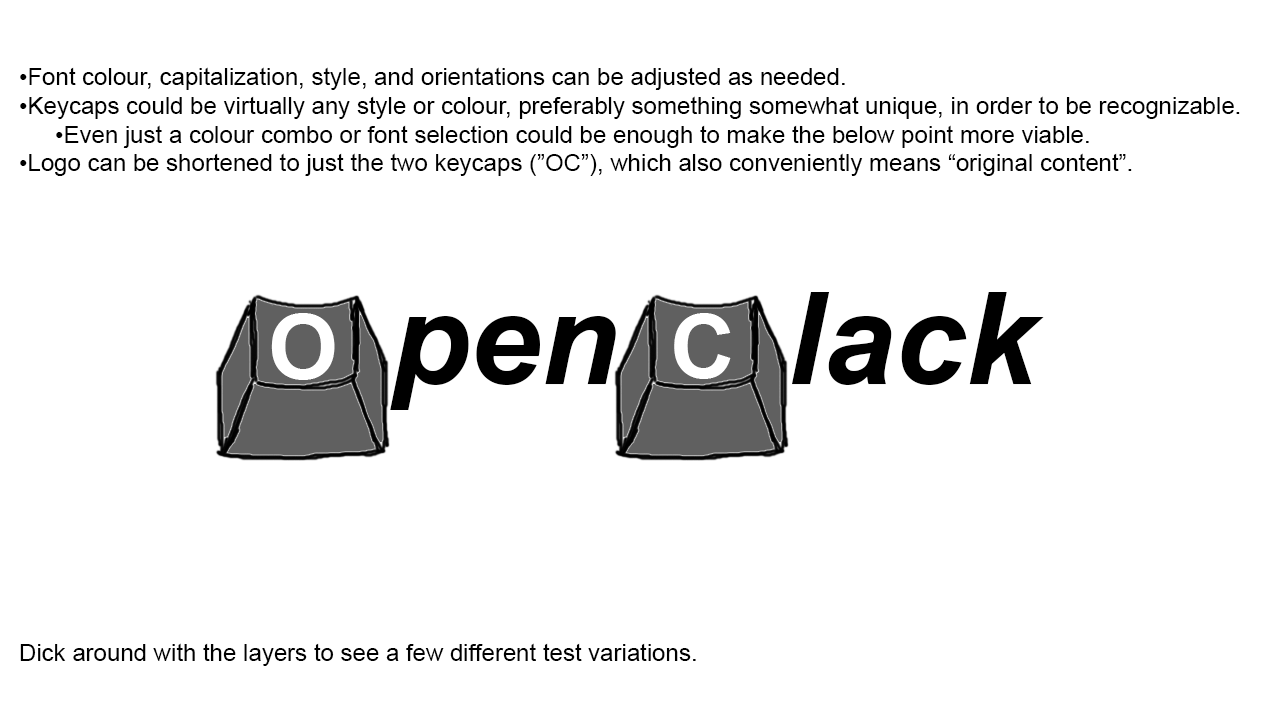
<style>
.page{position:relative;width:1280px;height:720px;background:#ffffff}
.page>*{position:absolute;margin:0}
.t1{font:24px "ArialMT";color:#000000}
.t2{font:128px "Arial-BoldItalicMT";color:#000000}
.t3{font:90px "Arial-BoldMT";color:#ffffff}
</style>
<div class="page">
<p class="t1" style="left:20px;top:67px;width:1220px;height:599px">•Font colour, capitalization, style, and orientations can be adjusted as needed.<br>•Keycaps could be virtually any style or colour, preferably something somewhat unique, in order to be recognizable.<br> •Even just a colour combo or font selection could be enough to make the below point more viable.<br>•Logo can be shortened to just the two keycaps (”OC”), which also conveniently means “original content”.<br><br><br><br><br><br><br><br><br><br><br><br><br><br><br><br><br>Dick around with the layers to see a few different test variations.</p>
<p class="t2" style="left:390px;top:292px;width:654px;height:118px">pen     lack</p>
<p class="t3" style="left:271px;top:313px;width:64px;height:67px">O</p>
<p class="t3" style="left:674px;top:313px;width:57px;height:66px">C</p>
</div>
